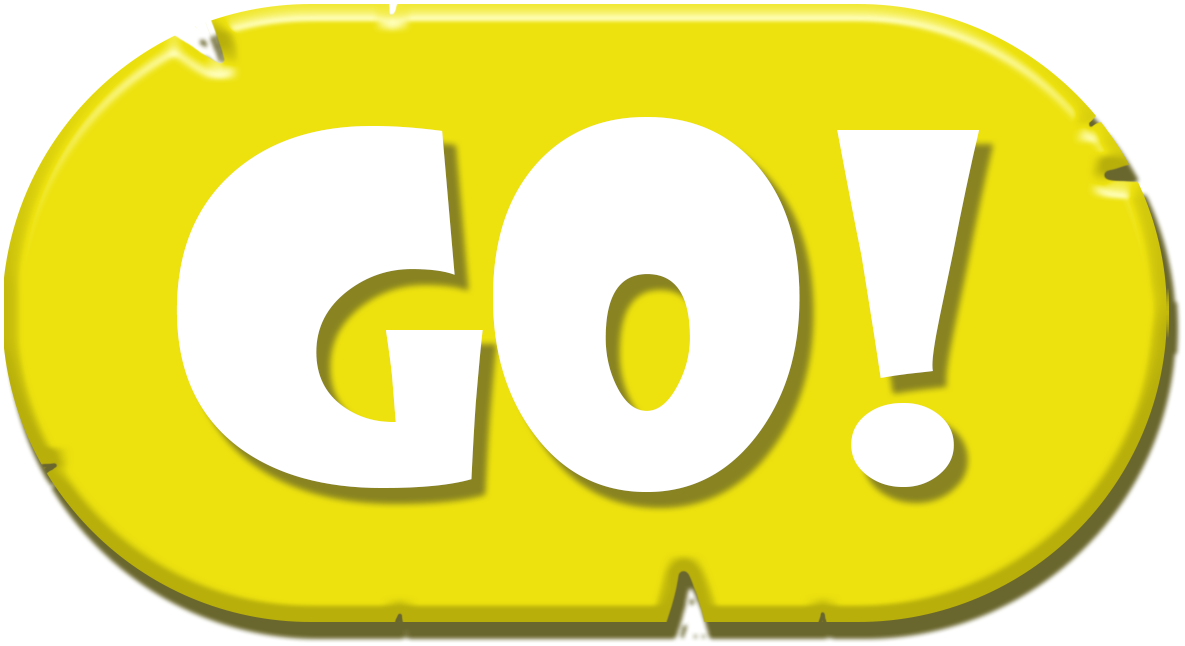
<style>
.page{position:relative;width:1185px;height:646px;background:#ede20e}
.page>*{position:absolute;margin:0}
.t1{font:465.7px "ShowcardGothic-Reg";color:#ffffff}
</style>
<div class="page">
<p class="t1" style="left:176px;top:117px;width:804px;height:375px">Go!</p>
</div>
